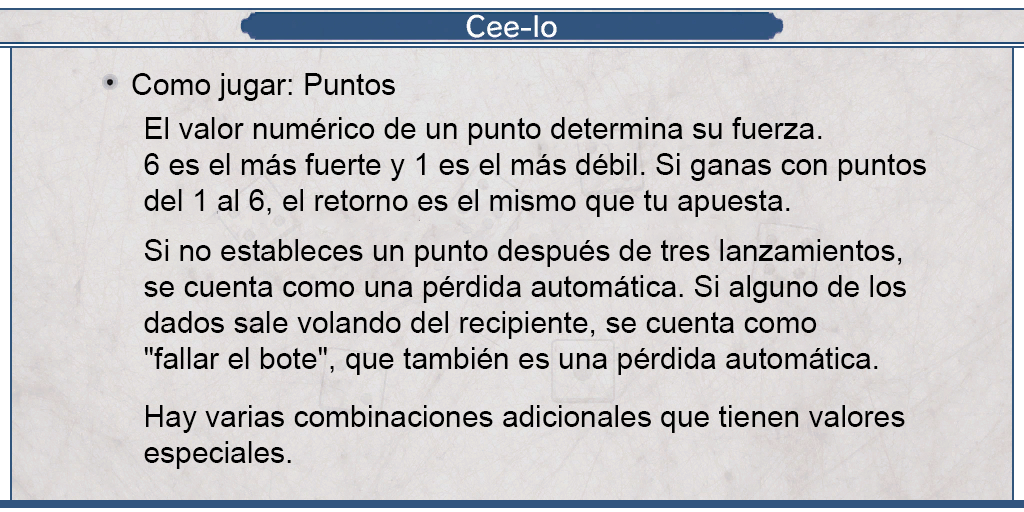
<style>
.page{position:relative;width:1024px;height:512px}
.page>*{position:absolute;margin:0}
.t1{font:29.8px "ArialMT";color:#000000}
.t2{font:30px "ArialMT";color:#000000}
</style>
<div class="page">
<p class="t1" style="left:132px;top:73px;width:263px;height:28px">Como jugar: Puntos</p>
<p class="t2" style="left:144px;top:117px;width:782px;height:100px;text-align:justify">El valor numérico de un punto determina su fuerza.<br>6 es el más fuerte y 1 es el más débil. Si ganas con puntos<br>del 1 al 6, el retorno es el mismo que tu apuesta.</p>
<p class="t2" style="left:144px;top:239px;width:762px;height:230px;text-align:justify">Si no estableces un punto después de tres lanzamientos,<br>se cuenta como una pérdida automática. Si alguno de los<br>dados sale volando del recipiente, se cuenta como<br>"fallar el bote", que también es una pérdida automática.<br><br>Hay varias combinaciones adicionales que tienen valores<br>especiales.</p>
</div>
